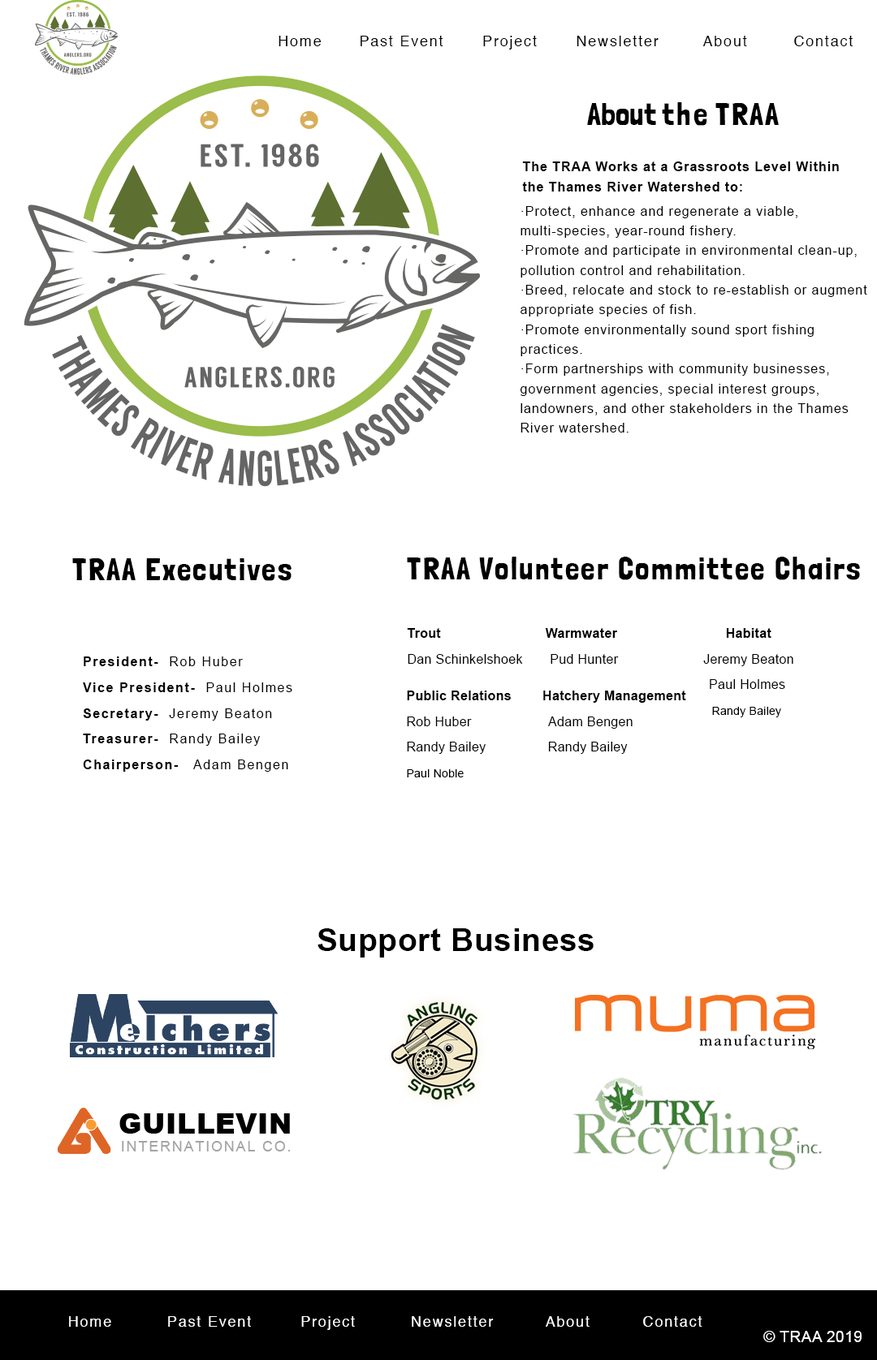
<style>
.page{position:relative;width:877px;height:1360px;background:#ffffff}
.page>*{position:absolute;margin:0}
.t1{font:14.6px "Helvetica";letter-spacing:0.1em;color:#010101}
.t2{font:14.6px "Helvetica";letter-spacing:0.1em;color:#000000}
.t3{font:31.5px "LondrinaSolid-Regular";letter-spacing:0.001em;color:#000000}
.t4{font:31.5px "LondrinaSolid-Regular";letter-spacing:0.08em;color:#000000}
.t5{font:31.5px "LondrinaSolid-Regular";letter-spacing:0.06em;color:#000000}
.t6{font:13px/19.7px "Arial-BoldMT";letter-spacing:0.06em;color:#000000}
.t7{font:13px/19.7px "ArialMT";letter-spacing:0.06em;color:#000000}
.t8{font:13px/25.6px "ArialMT";letter-spacing:0.02em;color:#000000}
.t9{font:13px/25.6px "Arial-BoldMT";letter-spacing:0.02em;color:#000000}
.t10{font:11.4px/25.6px "ArialMT";letter-spacing:0.02em;color:#000000}
.t11{font:13px/25.6px "Arial-BoldMT";letter-spacing:0.1em;color:#000000}
.t12{font:13px/25.6px "ArialMT";letter-spacing:0.1em;color:#000000}
.t13{font:31.5px "Arial-BoldMT";letter-spacing:0.02em;color:#000000}
.t14{font:14.6px "Helvetica";letter-spacing:0.1em;color:#ffffff}
.t15{font:15.6px "ArialMT";letter-spacing:0.02em;color:#ffffff}
</style>
<div class="page">
<p class="t1" style="left:278px;top:36px;width:43px;height:10px">Home</p>
<p class="t2" style="left:360px;top:36px;width:83px;height:10px">Past Event</p>
<p class="t2" style="left:483px;top:36px;width:53px;height:14px">Project</p>
<p class="t2" style="left:576px;top:36px;width:82px;height:10px">Newsletter</p>
<p class="t2" style="left:702px;top:36px;width:45px;height:10px">About</p>
<p class="t2" style="left:794px;top:36px;width:58px;height:10px">Contact</p>
<p class="t3" style="left:587px;top:102px;width:191px;height:24px">About <span class="t4">the </span><span class="t5">TRAA</span></p>
<p class="t6" style="left:522px;top:162px;width:316px;height:30px">The TRAA Works at a Grassroots Level Within the Thames River Watershed to:</p>
<p class="t7" style="left:519px;top:206px;width:348px;height:227px">·Protect, enhance and regenerate a viable, multi-species, year-round fishery.<br>·Promote and participate in environmental clean-up, pollution control and rehabilitation.<br>·Breed, relocate and stock to re-establish or augment appropriate species of fish.<br>·Promote environmentally sound sport fishing practices.<br>·Form partnerships with community businesses, government agencies, special interest groups, landowners, and other stakeholders in the Thames River watershed.</p>
<p class="t5" style="left:407px;top:557px;width:453px;height:23px">TRAA Volunteer Committee Chairs</p>
<p class="t5" style="left:72px;top:558px;width:219px;height:23px">TRAA Executives</p>
<p class="t8" style="left:407px;top:628px;width:386px;height:89px"><span class="t9">Trout                           Warmwater                            Habitat  </span>      <br>Dan Schinkelshoek       Pud Hunter                      Jeremy Beaton<br>                                                                              Paul Holmes <br><span class="t10">                                                                                          Randy Bailey</span></p>
<p class="t11" style="left:83px;top:657px;width:209px;height:115px">President-  <span class="t12">Rob Huber <br></span>Vice President-  <span class="t12">Paul Holmes  <br></span>Secretary-  <span class="t12">Jeremy Beaton <br></span>Treasurer-  <span class="t12">Randy Bailey <br></span>Chairperson-<span class="t12">   Adam Bengen</span></p>
<p class="t8" style="left:407px;top:691px;width:279px;height:87px"><span class="t9">Public Relations        Hatchery Management </span> <br>Rob Huber                    Adam Bengen<br>Randy Bailey                Randy Bailey <br><span class="t10">Paul Noble</span></p>
<p class="t13" style="left:317px;top:929px;width:276px;height:29px">Support Business</p>
<p class="t14" style="left:69px;top:1316px;width:42px;height:11px">Home</p>
<p class="t14" style="left:168px;top:1316px;width:83px;height:11px">Past Event</p>
<p class="t14" style="left:301px;top:1316px;width:54px;height:14px">Project</p>
<p class="t14" style="left:412px;top:1316px;width:81px;height:11px">Newsletter</p>
<p class="t14" style="left:545px;top:1316px;width:44px;height:11px">About</p>
<p class="t14" style="left:643px;top:1316px;width:59px;height:11px">Contact</p>
<p class="t15" style="left:763px;top:1331px;width:98px;height:11px">© TRAA 2019</p>
</div>
